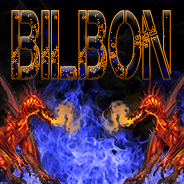
<style>
.page{position:relative;width:184px;height:184px}
.page>*{position:absolute;margin:0}
.t1{font:98.4px "Captureit";scale:0.5 1}
</style>
<div class="page">
<p class="t1" style="left:11px;top:10px;width:160px;height:70px">BILBON</p>
</div>
